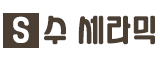
<style>
.page{position:relative;width:160px;height:60px;background:#ffffff}
.page>*{position:absolute;margin:0}
.t1{font:25.7px "YANGJIN";letter-spacing:0.03em;color:#ffffff}
.t2{font:28.2px "YANGJIN";letter-spacing:0.03em;color:#4b3f33;scale:1.03 1}
</style>
<div class="page">
<p class="t1" style="left:13px;top:16px;width:16px;height:27px">S</p>
<p class="t2" style="left:44px;top:15px;width:111px;height:30px">수 세라믹</p>
</div>
